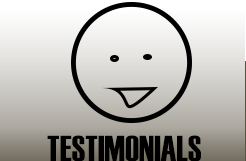
<style>
.page{position:relative;width:246px;height:161px}
.page>*{position:absolute;margin:0}
.t1{font:36px "Haettenschweiler";color:#000000}
</style>
<div class="page">
<p class="t1" style="left:47px;top:135px;width:154px;height:27px">TESTIMONIALS</p>
</div>
